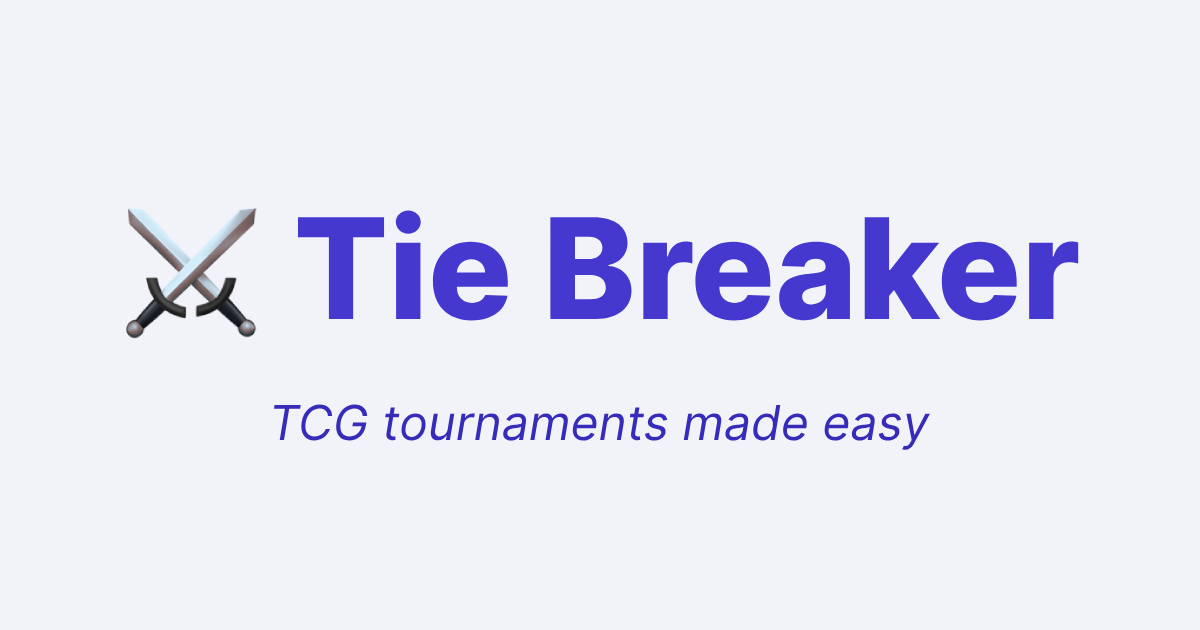
<style>
.page{position:relative;width:1200px;height:630px;background:#f1f3f9}
.page>*{position:absolute;margin:0}
.t1{font:140px "Inter-ExtraBold";color:#4438cf}
.t2{font:48px "Inter-Italic";color:#372bba}
</style>
<div class="page">
<p class="t1" style="left:297px;top:210px;width:782px;height:111px">Tie Breaker</p>
<p class="t2" style="left:273px;top:404px;width:657px;height:46px">TCG tournaments made easy</p>
</div>
